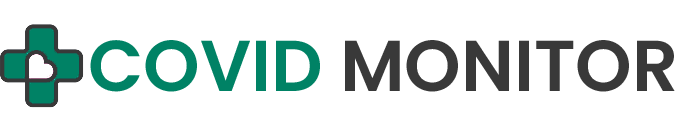
<style>
.page{position:relative;width:675px;height:128px;background:#ffffff}
.page>*{position:absolute;margin:0}
.t1{font:72px "Poppins-SemiBold";color:#393939}
.t2{font:72px "Poppins-SemiBold";color:#008265}
</style>
<div class="page">
<p class="t1" style="left:90px;top:40px;width:585px;height:52px"><span class="t2">COVID </span>MONITOR</p>
</div>
